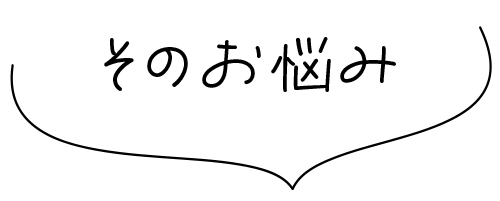
<style>
.page{position:relative;width:500px;height:201px;background:#ffffff}
.page>*{position:absolute;margin:0}
.t1{font:63.8px "VDL-PenLetter-Medium";letter-spacing:0.05em;color:#000000}
</style>
<div class="page">
<p class="t1" style="left:104px;top:37px;width:292px;height:55px">そのお悩み</p>
</div>
